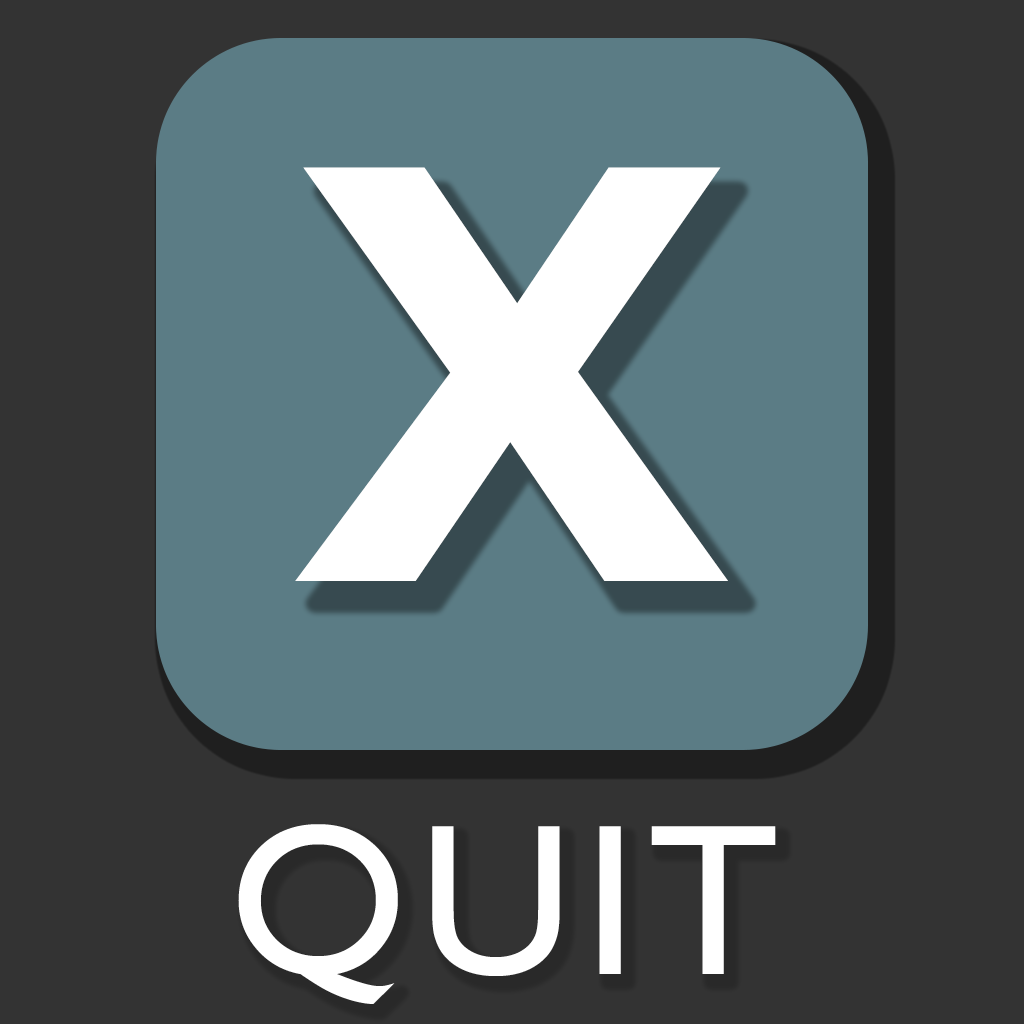
<style>
.page{position:relative;width:1024px;height:1024px;background:#333333}
.page>*{position:absolute;margin:0}
.t1{font:833.3px "Consolas-Bold";letter-spacing:0.05em;color:#ffffff}
.t2{font:216.7px "GillSansMT";letter-spacing:0.05em;color:#ffffff}
</style>
<div class="page">
<p class="t1" style="left:295px;top:167px;width:433px;height:414px">x</p>
<p class="t2" style="left:238px;top:824px;width:538px;height:180px">QUIT</p>
</div>
